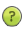
<style>
.page{position:relative;width:24px;height:32px;background:#ffffff}
.page>*{position:absolute;margin:0}
.t1{font:15px "BookmanOldStyle";color:#5e6827;font-weight:bold;scale:0.8 1}
</style>
<div class="page">
<p class="t1" style="left:9px;top:11px;width:7px;height:11px">?</p>
</div>
